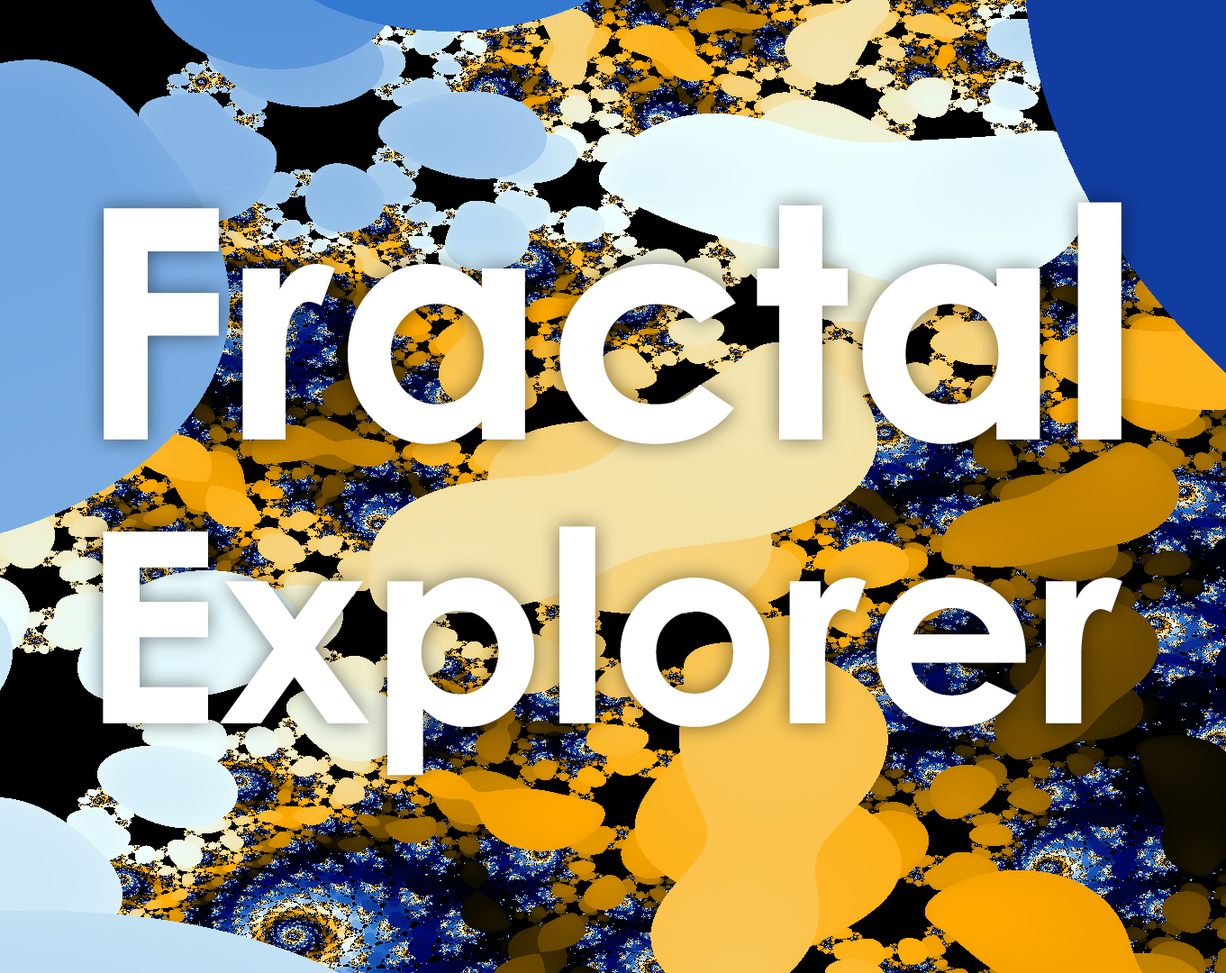
<style>
.page{position:relative;width:1226px;height:973px}
.page>*{position:absolute;margin:0}
.t1{font:321.5px "CenturyGothic-Bold";color:#ffffff}
.t2{font:266.6px "CenturyGothic-Bold";color:#ffffff}
</style>
<div class="page">
<p class="t1" style="left:104px;top:202px;width:1017px;height:242px">Fractal</p>
<p class="t2" style="left:103px;top:526px;width:1019px;height:249px">Explorer</p>
</div>
